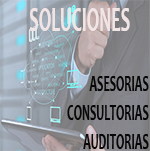
<style>
.page{position:relative;width:150px;height:151px}
.page>*{position:absolute;margin:0}
.t1{font:36px "Candara-Bold";color:#f2e5e6;scale:0.5 1}
.t2{font:24px "Candara-Bold";color:#070707;scale:0.5 1}
</style>
<div class="page">
<p class="t1" style="left:29px;top:8px;width:101px;height:23px">SOLUCIONES</p>
<p class="t2" style="left:67px;top:76px;width:82px;height:73px;text-align:right">ASESORIAS<br>CONSULTORIAS<br>AUDITORIAS</p>
</div>
